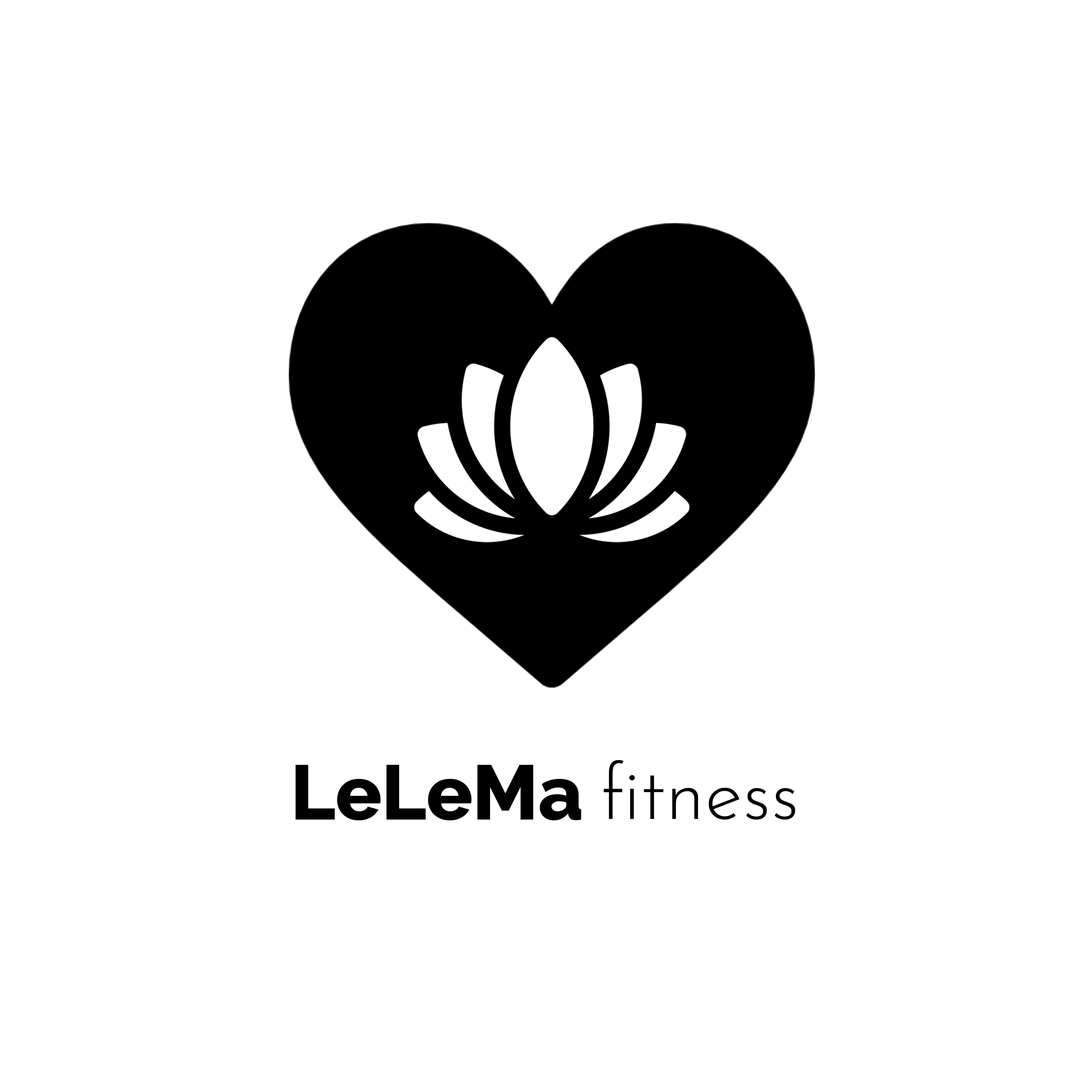
<style>
.page{position:relative;width:1092px;height:1092px;background:#ffffff}
.page>*{position:absolute;margin:0}
.t1{font:77.1px "JosefinSans-Light";color:#000000}
.t2{font:77.1px "RalewayRoman-ExtraBold";color:#000000}
</style>
<div class="page">
<p class="t1" style="left:603px;top:760px;width:192px;height:60px">fitness</p>
<p class="t2" style="left:296px;top:765px;width:285px;height:55px">LeLeMa</p>
</div>
